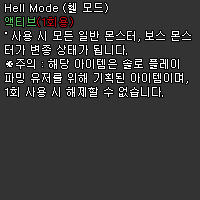
<style>
.page{position:relative;width:200px;height:200px;background:#333333}
.page>*{position:absolute;margin:0}
.t1{font:11px/14px "Dotum";color:#ffffff}
.t2{font:11px/14px "Dotum";color:#56c45b}
.t3{font:11px/14px "Dotum";color:#be0b0f}
</style>
<div class="page">
<p class="t1" style="left:5px;top:3px;width:186px;height:94px">Hell Mode (헬 모드)<br><span class="t2">액티브</span><span class="t3">(1회용)<br></span>˚ 사용 시 모든 일반 몬스터, 보스 몬스<br>터가 변종 상태가 됩니다.<br>※주의 : 해당 아이템은 솔로 플레이<br>파밍 유저를 위해 기획된 아이템이며,<br>1회 사용 시 해제할 수 없습니다.</p>
</div>
